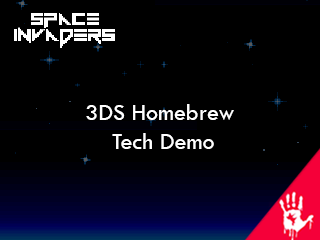
<style>
.page{position:relative;width:320px;height:240px;background:#000000}
.page>*{position:absolute;margin:0}
.t1{font:24px "TwCenMT-Regular";color:#ffffff}
</style>
<div class="page">
<p class="t1" style="left:86px;top:104px;width:148px;height:45px;text-align:center">3DS Homebrew <br>Tech Demo</p>
</div>
